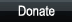
<style>
.page{position:relative;width:72px;height:22px}
.page>*{position:absolute;margin:0}
.t1{font:14px "ArialNarrow";color:#ffffff}
</style>
<div class="page">
<p class="t1" style="left:18px;top:5px;width:37px;height:11px">Donate</p>
</div>
